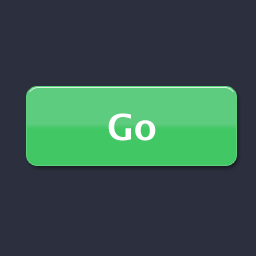
<style>
.page{position:relative;width:256px;height:256px;background:#2c303e}
.page>*{position:absolute;margin:0}
.t1{font:36px "LucidaGrande-Bold";color:#ffffff}
</style>
<div class="page">
<p class="t1" style="left:108px;top:113px;width:48px;height:28px">Go</p>
</div>
